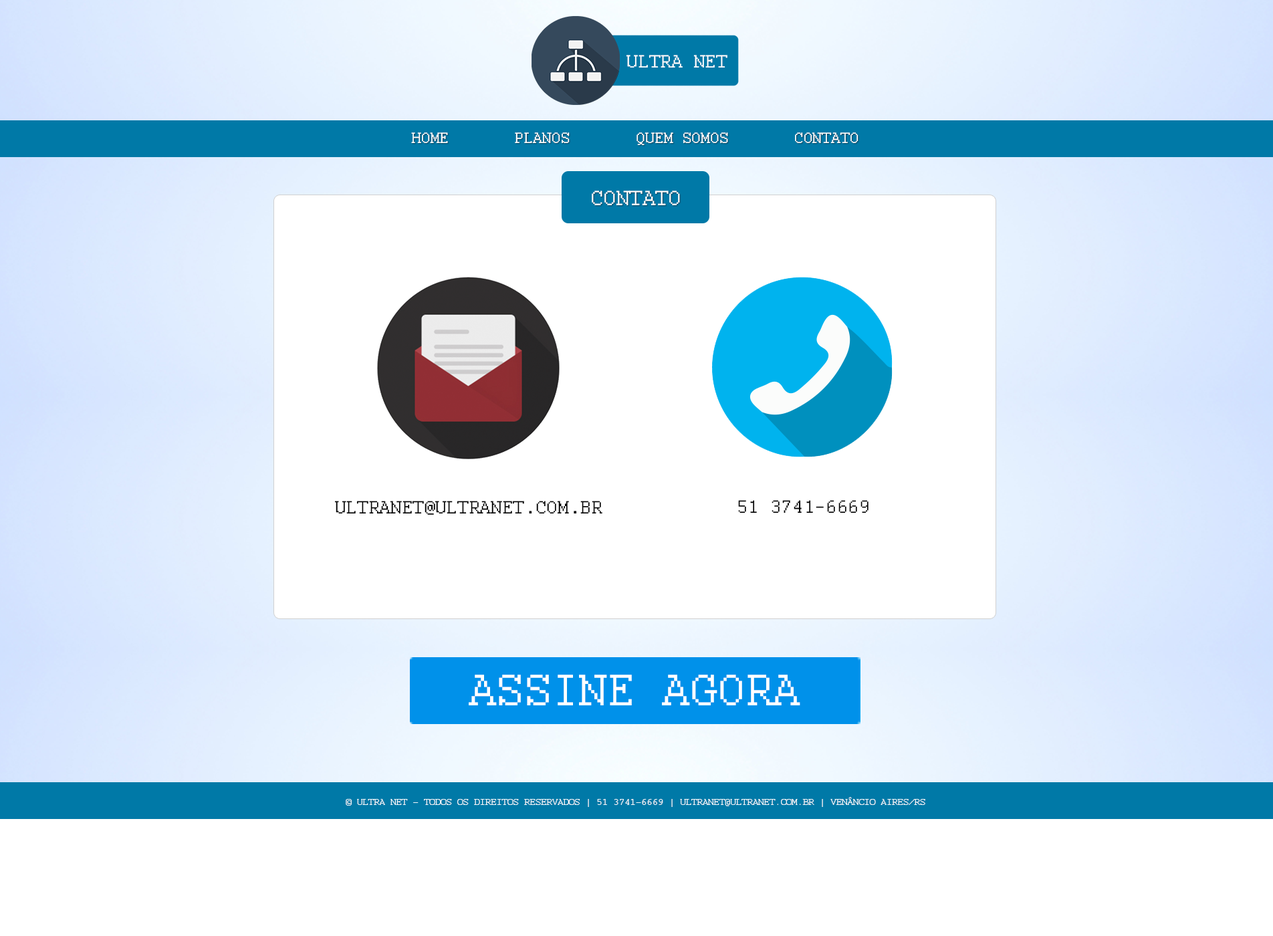
<style>
.page{position:relative;width:1273px;height:936px;background:#ffffff}
.page>*{position:absolute;margin:0}
.t1{font:19.9px "Courier";color:#ffffff;text-transform:uppercase}
.t2{font:16.5px "Courier";color:#ffffff}
.t3{font:23.1px "Courier";color:#ffffff}
.t4{font:19.8px "Courier";color:#000000}
.t5{font:48.9px "Courier";color:#ffffff}
.t6{font:9.9px "Courier";color:#ffffff}
</style>
<div class="page">
<p class="t1" style="left:626px;top:55px;width:102px;height:13px">ultra net</p>
<p class="t2" style="left:411px;top:132px;width:37px;height:11px">HOME</p>
<p class="t2" style="left:515px;top:132px;width:55px;height:11px">PLANOS</p>
<p class="t2" style="left:637px;top:132px;width:91px;height:13px">QUEM SOMOS</p>
<p class="t2" style="left:795px;top:132px;width:64px;height:11px">CONTATO</p>
<p class="t3" style="left:592px;top:191px;width:88px;height:14px">CONTATO</p>
<p class="t4" style="left:334px;top:501px;width:269px;height:14px">ULTRANET@ULTRANET.COM.BR</p>
<p class="t4" style="left:738px;top:500px;width:131px;height:13px">51 3741-6669</p>
<p class="t5" style="left:469px;top:675px;width:332px;height:31px">ASSINE AGORA</p>
<p class="t5" style="left:470px;top:675px;width:331px;height:31px">ASSINE AGORA</p>
<p class="t6" style="left:346px;top:797px;width:580px;height:10px">© ULTRA NET - TODOS OS DIREITOS RESERVADOS | 51 3741-6669 | ULTRANET@ULTRANET.COM.BR | VENÂNCIO AIRES/RS</p>
</div>
